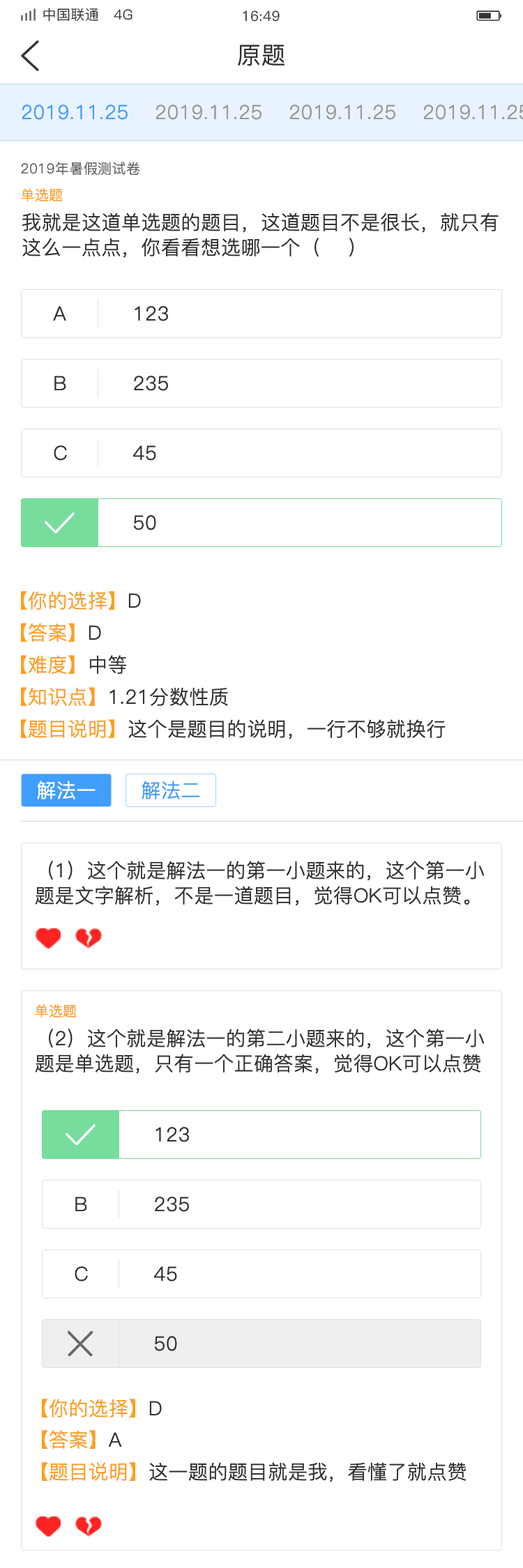
<style>
.page{position:relative;width:523px;height:1568px;background:#ffffff}
.page>*{position:absolute;margin:0}
.t1{font:13.9px "PingFang-SC-Medium";letter-spacing:0.02em;color:#333333}
.t2{font:23.7px "PingFang-SC-Regular";letter-spacing:0.02em;color:#333333}
.t3{font:19.5px "PingFang-SC-Regular";letter-spacing:0.02em;color:#409eff}
.t4{font:19.5px "PingFang-SC-Regular";letter-spacing:0.02em;color:#999999}
.t5{font:13.9px "PingFang-SC-Regular";letter-spacing:0.02em;color:#666666}
.t6{font:13.9px "PingFang-SC-Regular";letter-spacing:0.02em;color:#ff9e21}
.t7{font:19.5px/25.1px "PingFang-SC-Regular";letter-spacing:0.02em;color:#333333}
.t8{font:19.5px "PingFang-SC-Regular";letter-spacing:0.02em;color:#333333}
.t9{font:19.5px "PingFang-SC-Regular";letter-spacing:0.02em;color:#ff9e21}
.t10{font:19.5px "PingFang-SC-Regular";letter-spacing:0.02em;color:#ffffff}
</style>
<div class="page">
<p class="t1" style="left:43px;top:8px;width:89px;height:14px">中国联通   4G</p>
<p class="t1" style="left:243px;top:10px;width:36px;height:12px">16:49</p>
<p class="t2" style="left:238px;top:45px;width:46px;height:21px">原题</p>
<p class="t3" style="left:22px;top:105px;width:106px;height:15px">2019.11.25</p>
<p class="t4" style="left:155px;top:105px;width:106px;height:15px">2019.11.25</p>
<p class="t4" style="left:289px;top:105px;width:106px;height:15px">2019.11.25</p>
<p class="t5" style="left:21px;top:162px;width:119px;height:14px">2019年暑假测试卷</p>
<p class="t6" style="left:21px;top:188px;width:42px;height:13px">单选题</p>
<p class="t7" style="left:22px;top:213px;width:476px;height:45px">我就是这道单选题的题目，这道题目不是很长，就只有这么一点点，你看看想选哪一个（    ）</p>
<p class="t8" style="left:53px;top:306px;width:13px;height:15px">A</p>
<p class="t8" style="left:134px;top:306px;width:34px;height:15px">123</p>
<p class="t8" style="left:54px;top:376px;width:12px;height:14px">B</p>
<p class="t8" style="left:134px;top:376px;width:34px;height:15px">235</p>
<p class="t8" style="left:54px;top:445px;width:13px;height:16px">C</p>
<p class="t8" style="left:133px;top:445px;width:23px;height:16px">45</p>
<p class="t8" style="left:134px;top:515px;width:22px;height:15px">50</p>
<p class="t9" style="left:21px;top:591px;width:120px;height:19px">【你的选择】<span class="t8">D</span></p>
<p class="t9" style="left:21px;top:623px;width:80px;height:19px">【答案】<span class="t8">D</span></p>
<p class="t9" style="left:21px;top:655px;width:105px;height:19px">【难度】<span class="t8">中等</span></p>
<p class="t8" style="left:21px;top:687px;width:207px;height:19px"><span class="t9">【知识点】</span>1.21分数性质</p>
<p class="t8" style="left:21px;top:719px;width:424px;height:20px"><span class="t9">【题目说明】</span>这个是题目的说明，一行不够就换行</p>
<p class="t10" style="left:37px;top:781px;width:58px;height:18px">解法一</p>
<p class="t3" style="left:141px;top:781px;width:59px;height:18px">解法二</p>
<p class="t7" style="left:35px;top:861px;width:449px;height:45px">（1）这个就是解法一的第一小题来的，这个第一小题是文字解析，不是一道题目，觉得OK可以点赞。</p>
<p class="t6" style="left:35px;top:1004px;width:42px;height:13px">单选题</p>
<p class="t7" style="left:35px;top:1029px;width:449px;height:45px">（2）这个就是解法一的第二小题来的，这个第一小题是单选题，只有一个正确答案，觉得OK可以点赞。</p>
<p class="t8" style="left:155px;top:1127px;width:34px;height:15px">123</p>
<p class="t8" style="left:75px;top:1197px;width:12px;height:14px">B</p>
<p class="t8" style="left:155px;top:1197px;width:34px;height:15px">235</p>
<p class="t8" style="left:75px;top:1266px;width:13px;height:16px">C</p>
<p class="t8" style="left:154px;top:1266px;width:23px;height:16px">45</p>
<p class="t8" style="left:155px;top:1336px;width:22px;height:15px">50</p>
<p class="t9" style="left:42px;top:1399px;width:120px;height:18px">【你的选择】<span class="t8">D</span></p>
<p class="t9" style="left:42px;top:1430px;width:80px;height:19px">【答案】<span class="t8">A</span></p>
<p class="t8" style="left:42px;top:1462px;width:424px;height:20px"><span class="t9">【题目说明】</span>这一题的题目就是我，看懂了就点赞</p>
</div>
